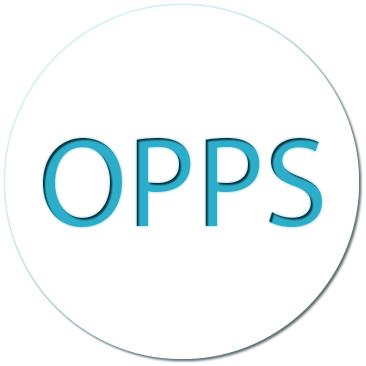
<style>
.page{position:relative;width:366px;height:366px;background:#ffffff}
.page>*{position:absolute;margin:0}
.t1{font:129.2px "MyriadPro-Regular";color:#2caecb}
</style>
<div class="page">
<p class="t1" style="left:43px;top:137px;width:279px;height:91px">OPPS</p>
</div>
